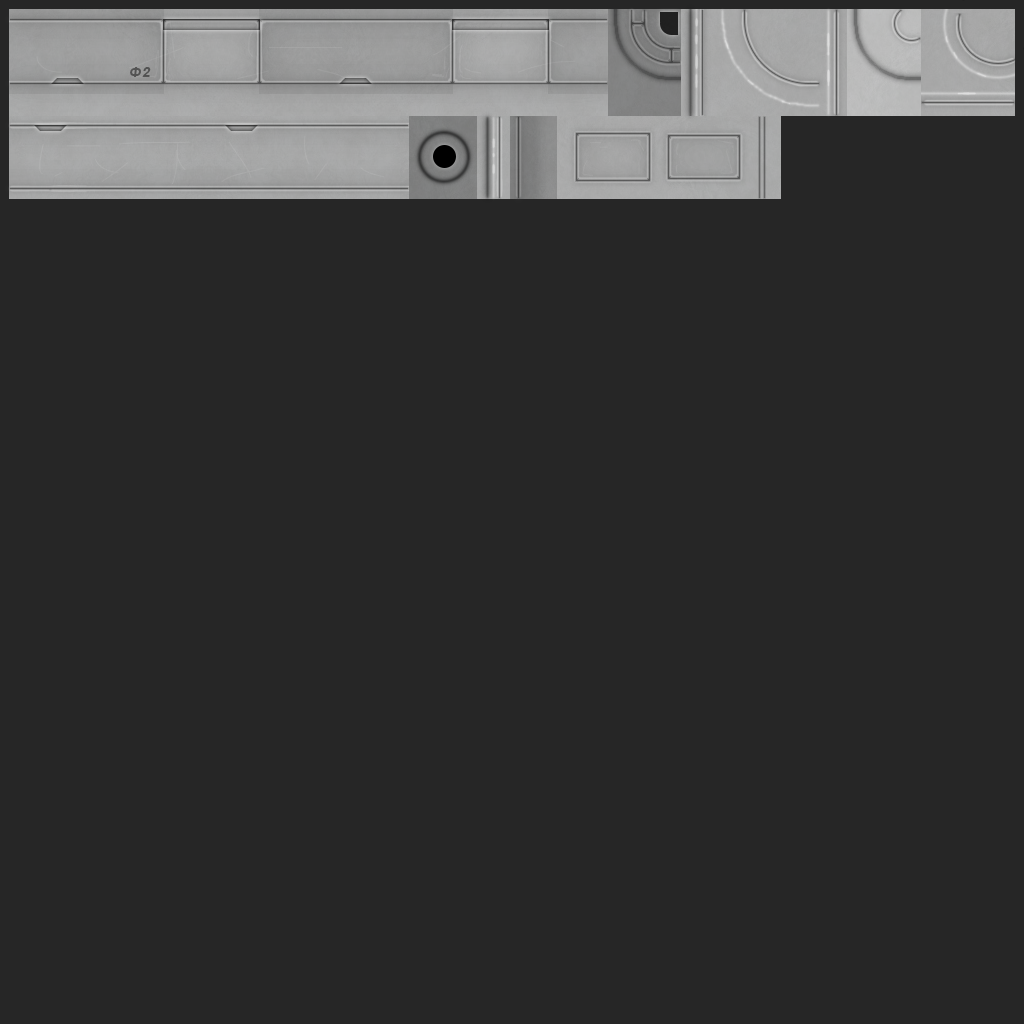
<style>
.page{position:relative;width:1024px;height:1024px;background:#262626}
.page>*{position:absolute;margin:0}
.t1{font:14.1px "Arial-BoldMT";letter-spacing:0.1em;color:#535353}
</style>
<div class="page">
<p class="t1" style="left:130px;top:67px;width:21px;height:10px">Ф2</p>
</div>
